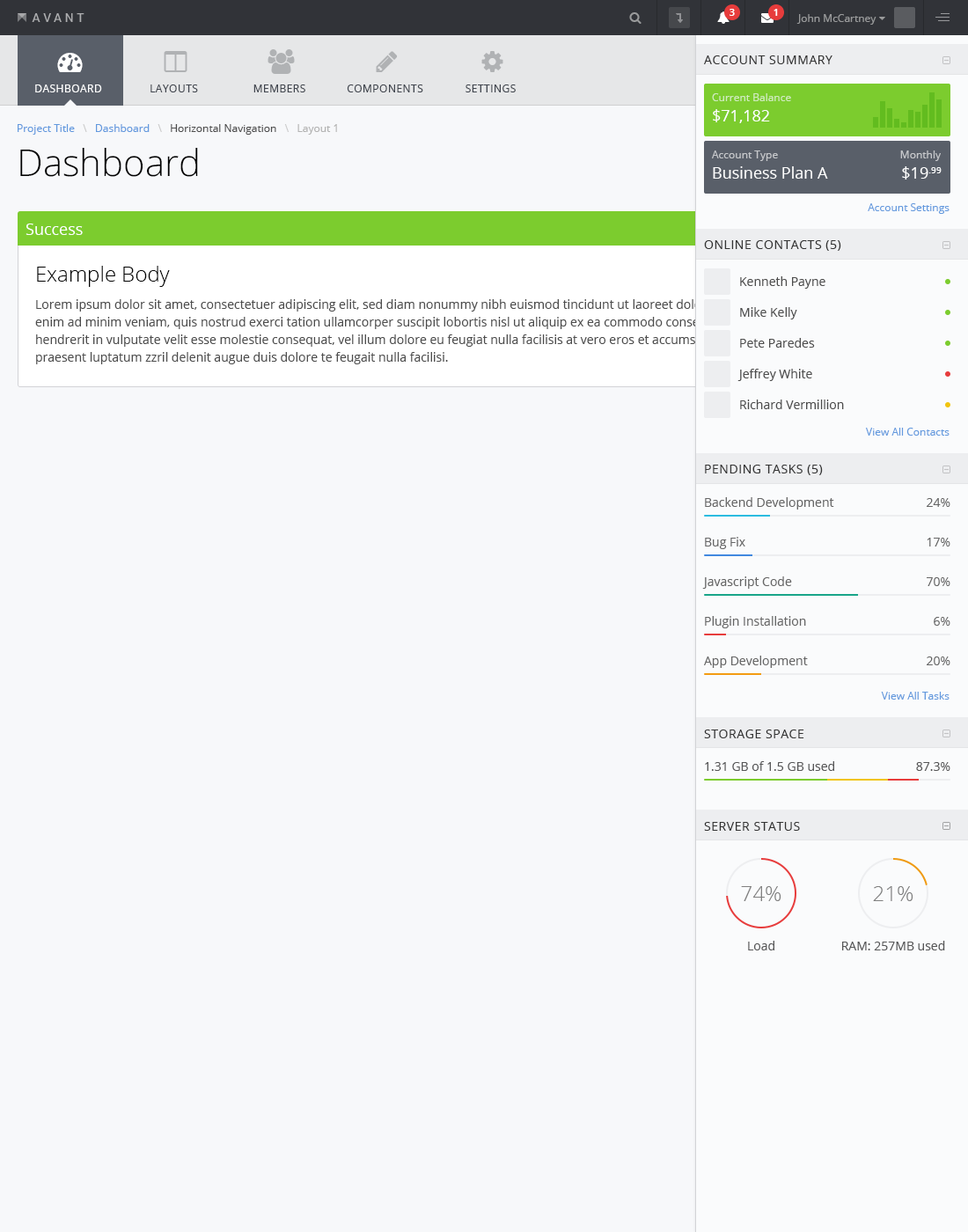
<style>
.page{position:relative;width:968px;height:1232px;background:#f7f8fa}
.page>*{position:absolute;margin:0}
.t1{font:9.7px "OpenSans-Semibold";color:#ffffff}
.t2{font:10.6px "OpenSans";color:#999a9b}
.t3{font:12.3px "OpenSans";letter-spacing:0.04em;color:#333333;text-transform:uppercase}
.t4{font:10.6px "OpenSans";letter-spacing:0.04em;color:#ffffff;text-transform:uppercase}
.t5{font:10.6px "OpenSans";letter-spacing:0.04em;color:#3f444d;text-transform:uppercase}
.t6{font:10.6px "OpenSans";color:#d1ebbe}
.t7{font:15.8px "OpenSans";color:#ffffff}
.t8{font:10.6px "OpenSans";color:#4d4d4d}
.t9{font:10.6px "OpenSans";color:#6299de}
.t10{font:10.6px "OpenSans";color:#cccccc}
.t11{font:10.6px "OpenSans";color:#b3b3b3}
.t12{font:37px "OpenSans-Light";color:#000000}
.t13{font:10.6px "OpenSans";color:#c7c9cc}
.t14{font:21.1px "OpenSans-Light";color:#010101}
.t15{font:12.3px "OpenSans";color:#4d4d4d}
.t16{font:12.3px/17.6px "OpenSans";color:#4d4d4d}
.t17{font:12.3px "OpenSans";color:#666666}
.t18{font:12.3px "OpenSans";color:#565657}
.t19{font:21.1px "OpenSans-Light";color:#808080}
</style>
<div class="page">
<p class="t1" style="left:729px;top:9px;width:6px;height:7px">3</p>
<p class="t1" style="left:773px;top:9px;width:5px;height:7px">1</p>
<p class="t2" style="left:796px;top:14px;width:80px;height:11px">John McCartney</p>
<p class="t3" style="left:704px;top:55px;width:128px;height:9px">Account Summary</p>
<p class="t4" style="left:35px;top:84px;width:67px;height:8px">Dashboard</p>
<p class="t5" style="left:150px;top:84px;width:48px;height:8px">Layouts</p>
<p class="t5" style="left:253px;top:84px;width:52px;height:8px">Members</p>
<p class="t5" style="left:347px;top:84px;width:76px;height:8px">Components</p>
<p class="t5" style="left:465px;top:84px;width:51px;height:8px">Settings</p>
<p class="t6" style="left:712px;top:93px;width:79px;height:8px">Current Balance</p>
<p class="t7" style="left:713px;top:109px;width:57px;height:14px">$71,182</p>
<p class="t8" style="left:18px;top:124px;width:319px;height:11px"><span class="t9">Project Title   </span><span class="t10">\   </span><span class="t9">Dashboard   </span><span class="t10">\   </span>Horizontal Navigation   <span class="t10">\   </span><span class="t11">Layout 1</span></p>
<p class="t12" style="left:20px;top:148px;width:178px;height:29px">Dashboard</p>
<p class="t13" style="left:712px;top:150px;width:66px;height:11px">Account Type</p>
<p class="t13" style="left:900px;top:150px;width:41px;height:11px">Monthly</p>
<p class="t7" style="left:713px;top:166px;width:115px;height:13px">Business Plan A</p>
<p class="t7" style="left:902px;top:166px;width:40px;height:14px">$19.99</p>
<p class="t9" style="left:868px;top:203px;width:81px;height:11px">Account Settings</p>
<p class="t7" style="left:26px;top:224px;width:57px;height:11px">Success</p>
<p class="t3" style="left:704px;top:240px;width:137px;height:11px">Online Contacts (5)</p>
<p class="t14" style="left:37px;top:266px;width:133px;height:21px">Example Body</p>
<p class="t15" style="left:740px;top:276px;width:85px;height:13px">Kenneth Payne</p>
<p class="t16" style="left:35px;top:299px;width:892px;height:65px">Lorem ipsum dolor sit amet, consectetuer adipiscing elit, sed diam nonummy nibh euismod tincidunt ut laoreet dolore magna aliquam erat volutpat. Ut wisi enim ad minim veniam, quis nostrud exerci tation ullamcorper suscipit lobortis nisl ut aliquip ex ea commodo consequat. Duis autem vel eum iriure dolor in hendrerit in vulputate velit esse molestie consequat, vel illum dolore eu feugiat nulla facilisis at vero eros et accumsan et iusto odio dignissim qui blandit praesent luptatum zzril delenit augue duis dolore te feugait nulla facilisi.</p>
<p class="t15" style="left:740px;top:307px;width:57px;height:12px">Mike Kelly</p>
<p class="t15" style="left:740px;top:338px;width:75px;height:10px">Pete Paredes</p>
<p class="t15" style="left:737px;top:369px;width:75px;height:12px">Jeffrey White</p>
<p class="t15" style="left:740px;top:399px;width:104px;height:10px">Richard Vermillion</p>
<p class="t9" style="left:866px;top:428px;width:83px;height:8px">View All Contacts</p>
<p class="t3" style="left:705px;top:465px;width:118px;height:10px">Pending Tasks (5)</p>
<p class="t17" style="left:705px;top:497px;width:129px;height:12px">Backend Development</p>
<p class="t17" style="left:927px;top:498px;width:23px;height:9px">24%</p>
<p class="t17" style="left:705px;top:537px;width:40px;height:12px">Bug Fix</p>
<p class="t17" style="left:927px;top:538px;width:23px;height:8px">17%</p>
<p class="t17" style="left:702px;top:576px;width:90px;height:13px">Javascript Code</p>
<p class="t17" style="left:927px;top:577px;width:23px;height:9px">70%</p>
<p class="t17" style="left:705px;top:616px;width:101px;height:12px">Plugin Installation</p>
<p class="t17" style="left:934px;top:617px;width:16px;height:9px">6%</p>
<p class="t17" style="left:704px;top:656px;width:104px;height:12px">App Development</p>
<p class="t17" style="left:927px;top:656px;width:23px;height:9px">20%</p>
<p class="t9" style="left:881px;top:692px;width:68px;height:8px">View All Tasks</p>
<p class="t3" style="left:704px;top:729px;width:100px;height:9px">Storage Space</p>
<p class="t18" style="left:705px;top:761px;width:129px;height:10px">1.31 GB of 1.5 GB used</p>
<p class="t18" style="left:916px;top:762px;width:34px;height:9px">87.3%</p>
<p class="t3" style="left:704px;top:822px;width:96px;height:9px">Server Status</p>
<p class="t19" style="left:741px;top:886px;width:40px;height:15px">74%</p>
<p class="t19" style="left:873px;top:886px;width:40px;height:15px">21%</p>
<p class="t18" style="left:748px;top:941px;width:26px;height:9px">Load</p>
<p class="t18" style="left:842px;top:941px;width:103px;height:9px">RAM: 257MB used</p>
</div>
